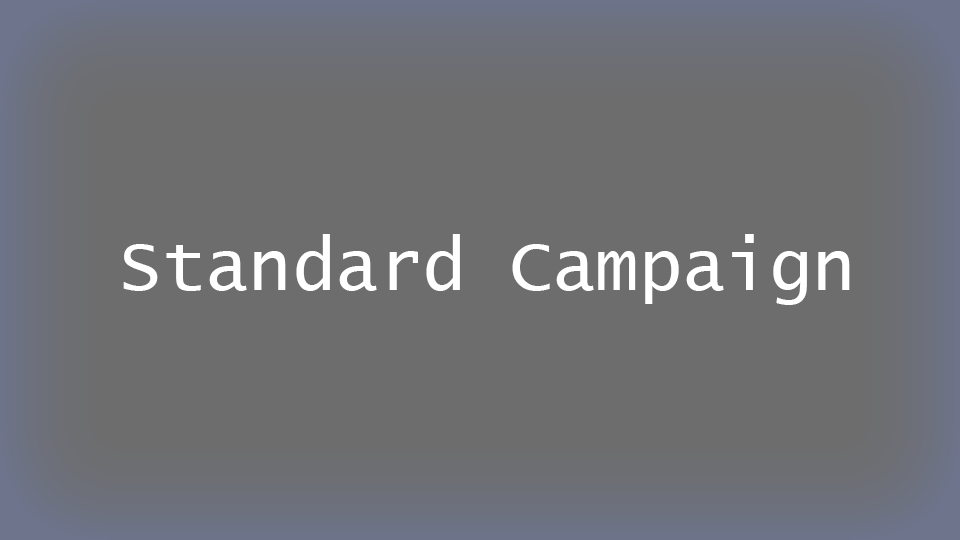
<style>
.page{position:relative;width:960px;height:540px;background:#6d6d6d}
.page>*{position:absolute;margin:0}
.t1{font:72px "LucidaConsole";color:#ffffff}
</style>
<div class="page">
<p class="t1" style="left:123px;top:234px;width:727px;height:71px">Standard Campaign</p>
</div>
